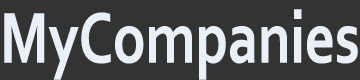
<style>
.page{position:relative;width:360px;height:80px;background:#333333}
.page>*{position:absolute;margin:0}
.t1{font:75px "Corbel-Bold";letter-spacing:-0.005em;color:#eaf0f7;scale:0.79 1}
</style>
<div class="page">
<p class="t1" style="left:4px;top:9px;width:354px;height:71px">MyCompanies</p>
</div>
